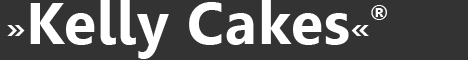
<style>
.page{position:relative;width:468px;height:60px;background:#333333}
.page>*{position:absolute;margin:0}
.t1{font:58.7px "Gisha-Bold";letter-spacing:0.02em;color:#ffffff}
.t2{font:31.7px "Gisha-Bold";letter-spacing:0.02em;color:#ffffff}
.t3{font:35.9px "Gisha-Bold";letter-spacing:0.02em;color:#ffffff}
</style>
<div class="page">
<p class="t1" style="left:7px;top:0px;width:380px;height:59px"><span class="t2">»</span>Kelly Cakes<span class="t2">«</span><span class="t3">®</span></p>
</div>
